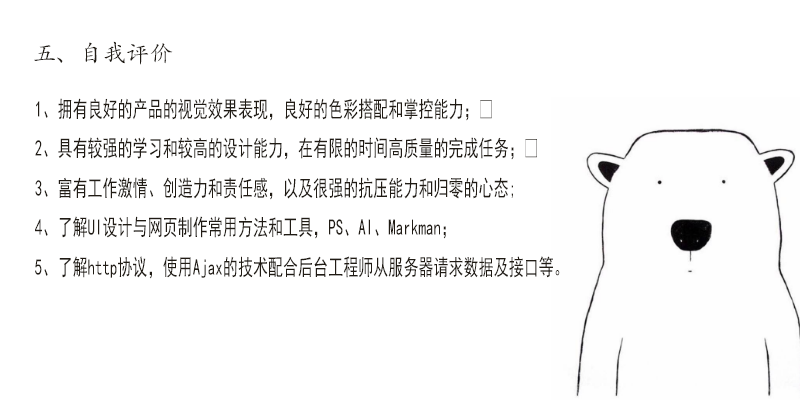
<style>
.page{position:relative;width:800px;height:400px;background:#ffffff}
.page>*{position:absolute;margin:0}
.t1{font:23.4px "AdobeKaitiStd-Regular";color:#201b14}
.t2{font:22.6px "SimHei";color:#201b14;scale:0.67 1}
</style>
<div class="page">
<p class="t1" style="left:34px;top:41px;width:139px;height:24px">五、自我评价</p>
<p class="t2" style="left:35px;top:98px;width:525px;height:181px">1、拥有良好的产品的视觉效果表现，良好的色彩搭配和掌控能力； <br>2、具有较强的学习和较高的设计能力，在有限的时间高质量的完成任务； <br>3、富有工作激情、创造力和责任感，以及很强的抗压能力和归零的心态;<br>4、了解UI设计与网页制作常用方法和工具，PS、AI、Markman；<br>5、了解http协议，使用Ajax的技术配合后台工程师从服务器请求数据及接口等。</p>
</div>
